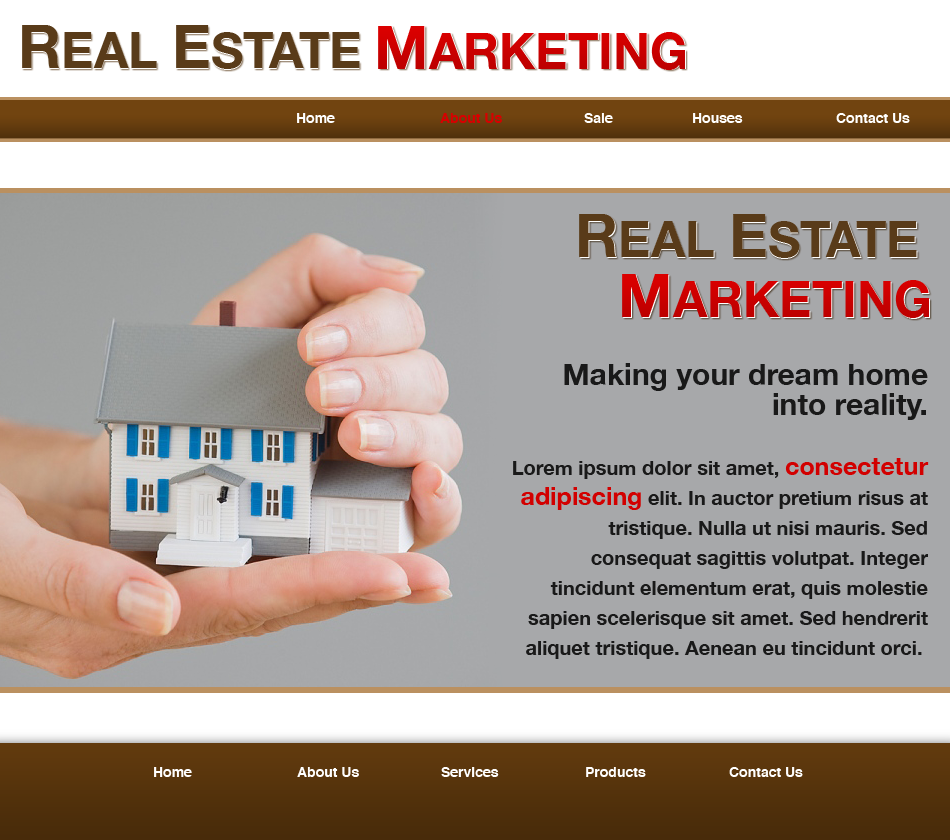
<style>
.page{position:relative;width:950px;height:840px;background:#a7a8aa}
.page>*{position:absolute;margin:0}
.t1{font:50px "HelveticaNeue-Bold"}
.t2{font:60px "HelveticaNeue-Bold"}
.t3{font:50px "HelveticaNeue-Bold";color:#593b19}
.t4{font:60px "HelveticaNeue-Bold";color:#593b19}
.t5{font:50px "HelveticaNeue-Bold";color:#cc0000}
.t6{font:60px "HelveticaNeue-Bold";color:#cc0000}
.t7{font:14px "Helvetica-Bold";color:#ffffff}
.t8{font:14px "Helvetica-Bold";color:#d80000}
.t9{font:50px/60px "HelveticaNeue-Bold"}
.t10{font:60px/60px "HelveticaNeue-Bold"}
.t11{font:20px/30px "HelveticaNeue-Bold";color:#191919}
.t12{font:30px/30px "HelveticaNeue-Bold";color:#191919}
.t13{font:25px/30px "HelveticaNeue-Bold";color:#d20000}
</style>
<div class="page">
<p class="t1" style="left:22px;top:26px;width:664px;height:44px"><span class="t2">R</span>EAL <span class="t2">E</span>STATE <span class="t2">M</span>ARKETING</p>
<p class="t3" style="left:22px;top:25px;width:338px;height:44px"><span class="t4">R</span>EAL <span class="t4">E</span>STATE</p>
<p class="t5" style="left:378px;top:26px;width:307px;height:44px"><span class="t6">M</span>ARKETING</p>
<p class="t7" style="left:297px;top:113px;width:613px;height:10px">Home   <span class="t8">About Us</span>   Sale   Houses   Contact Us</p>
<p class="t3" style="left:579px;top:214px;width:338px;height:44px"><span class="t4">R</span>EAL <span class="t4">E</span>STATE</p>
<p class="t9" style="left:580px;top:215px;width:350px;height:104px;text-align:right"><span class="t10">R</span>EAL <span class="t10">E</span>STATE <br><span class="t10">M</span>ARKETING</p>
<p class="t5" style="left:622px;top:274px;width:307px;height:44px"><span class="t6">M</span>ARKETING</p>
<p class="t11" style="left:513px;top:363px;width:416px;height:296px;text-align:right"><span class="t12">Making your dream home into reality.<br></span><br>Lorem ipsum dolor sit amet, <span class="t13">consectetur adipiscing</span> elit. In auctor pretium risus at tristique. Nulla ut nisi mauris. Sed consequat sagittis volutpat. Integer tincidunt elementum erat, quis molestie sapien scelerisque sit amet. Sed hendrerit aliquet tristique. Aenean eu tincidunt orci.</p>
<p class="t7" style="left:154px;top:767px;width:649px;height:10px">Home   About Us   Services   Products   Contact Us</p>
</div>
